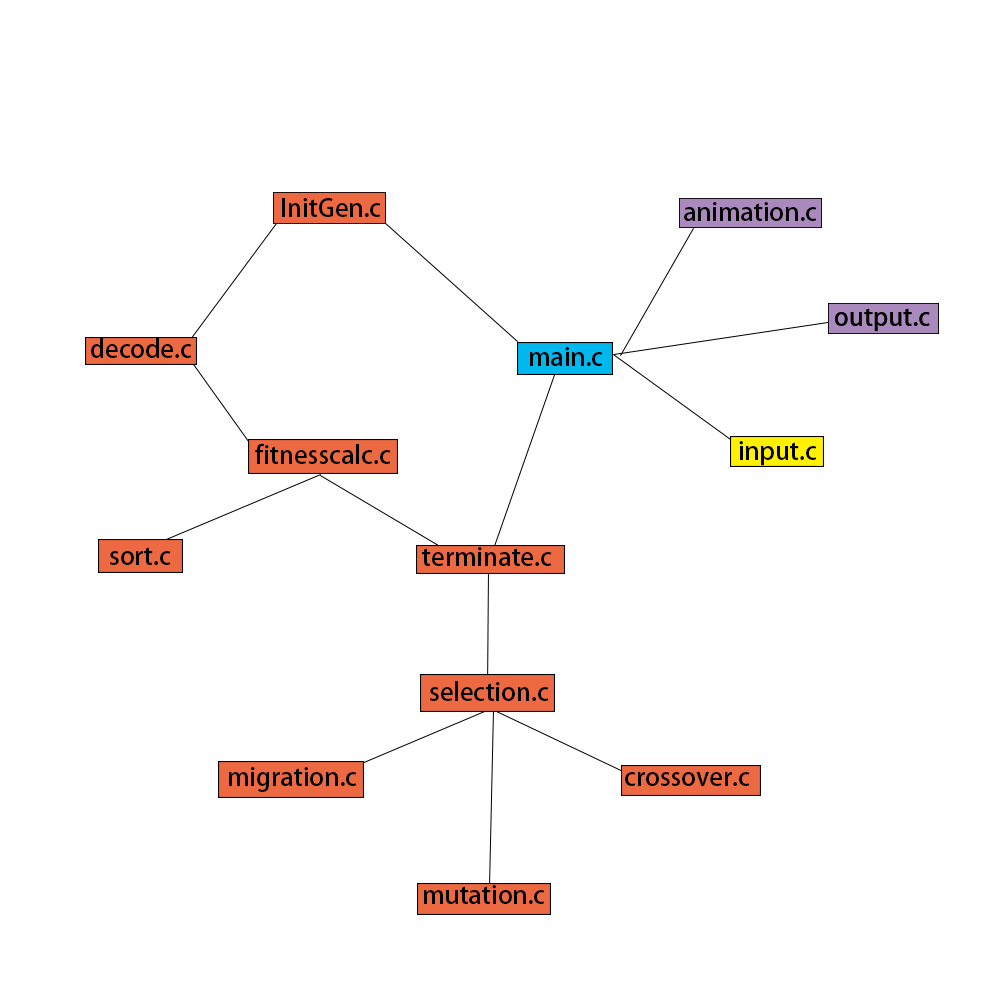
<style>
.page{position:relative;width:1000px;height:1000px;background:#ffffff}
.page>*{position:absolute;margin:0}
.t1{font:25px "AdobeHeitiStd-Regular";color:#000000}
</style>
<div class="page">
<p class="t1" style="left:282px;top:198px;width:99px;height:19px">InitGen.c</p>
<p class="t1" style="left:684px;top:202px;width:133px;height:19px">animation.c</p>
<p class="t1" style="left:835px;top:308px;width:95px;height:24px">output.c</p>
<p class="t1" style="left:91px;top:338px;width:101px;height:20px">decode.c</p>
<p class="t1" style="left:530px;top:347px;width:73px;height:19px">main.c</p>
<p class="t1" style="left:255px;top:443px;width:136px;height:21px">fitnesscalc.c</p>
<p class="t1" style="left:739px;top:441px;width:78px;height:25px">input.c</p>
<p class="t1" style="left:110px;top:547px;width:61px;height:18px">sort.c</p>
<p class="t1" style="left:422px;top:547px;width:130px;height:19px">terminate.c</p>
<p class="t1" style="left:430px;top:681px;width:119px;height:20px">selection.c</p>
<p class="t1" style="left:229px;top:767px;width:128px;height:25px">migration.c</p>
<p class="t1" style="left:625px;top:772px;width:125px;height:14px">crossover.c</p>
<p class="t1" style="left:424px;top:885px;width:121px;height:19px">mutation.c</p>
</div>
